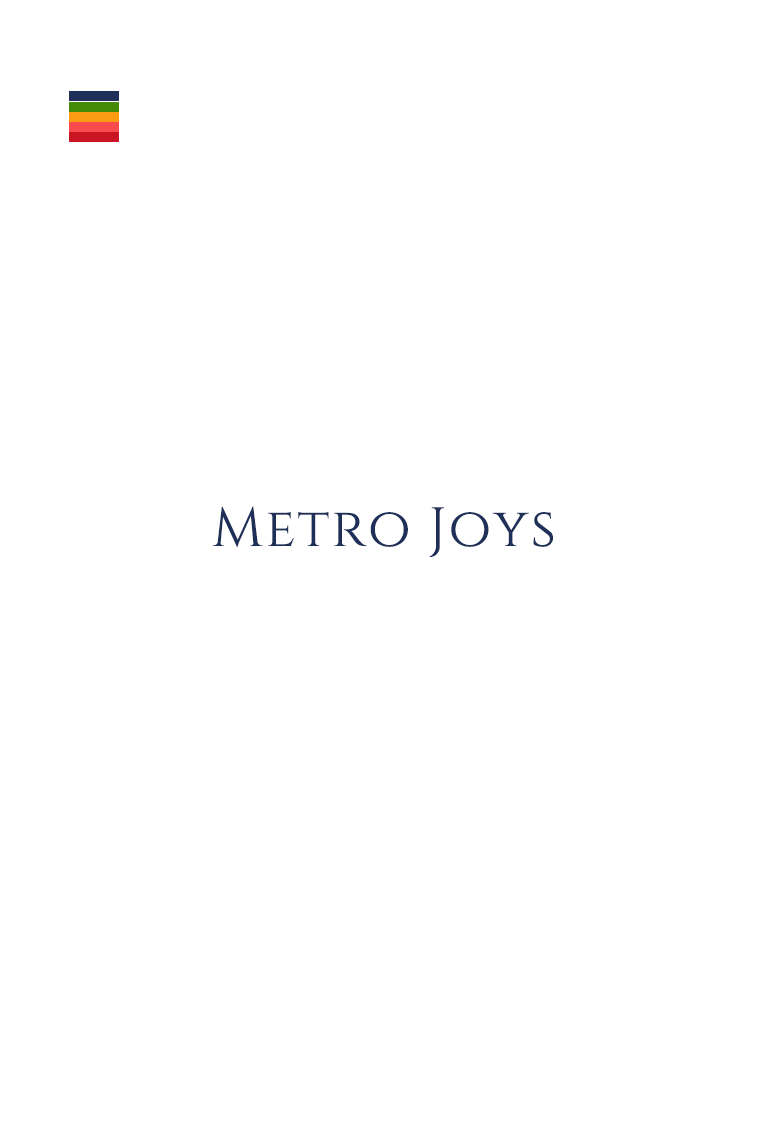
<style>
.page{position:relative;width:768px;height:1136px;background:#ffffff}
.page>*{position:absolute;margin:0}
.t1{font:55px "Cinzel-Regular";letter-spacing:0.04em;color:#1e3058}
</style>
<div class="page">
<p class="t1" style="left:212px;top:506px;width:341px;height:51px">Metro Joys</p>
</div>
